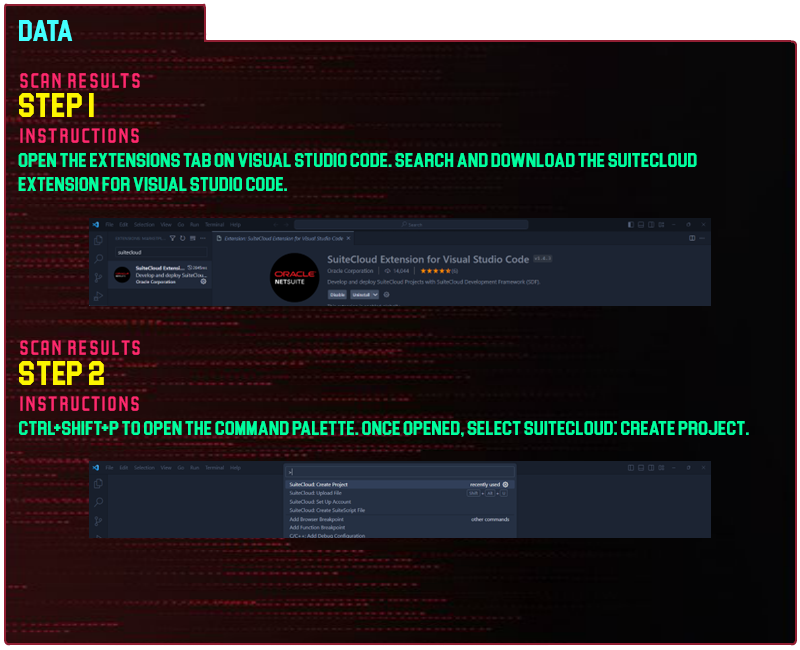
<style>
.page{position:relative;width:800px;height:650px}
.page>*{position:absolute;margin:0}
.t1{font:30px "Blockletter";color:#43ffff}
.t2{font:35px "Party-Lights-[WLM]-Flat";color:#ff296d}
.t3{font:35px "Blockletter";color:#fdf500}
.t4{font:20px "Blockletter";color:#00ff9f}
.t5{font:34.9px "Party-Lights-[WLM]-Flat";color:#ff296d}
.t6{font:34.9px "Blockletter";color:#fdf500}
.t7{font:19.9px "Blockletter";color:#00ff9f}
</style>
<div class="page">
<p class="t1" style="left:19px;top:20px;width:54px;height:21px">Data</p>
<p class="t2" style="left:20px;top:73px;width:120px;height:15px">Scan REsults</p>
<p class="t3" style="left:19px;top:93px;width:75px;height:24px">Step 1</p>
<p class="t2" style="left:20px;top:128px;width:119px;height:15px">instructions</p>
<p class="t4" style="left:18px;top:153px;width:679px;height:38px">Open the Extensions tab on Visual Studio Code. Search and Download the SuiteCloud Extension for Visual Studio Code.</p>
<p class="t5" style="left:20px;top:340px;width:120px;height:15px">Scan REsults</p>
<p class="t6" style="left:19px;top:361px;width:85px;height:24px">Step 2</p>
<p class="t5" style="left:20px;top:396px;width:119px;height:15px">instructions</p>
<p class="t7" style="left:19px;top:421px;width:730px;height:16px">Ctrl+Shift+P to open the command palette. Once opened, Select SuiteCloud: Create Project.</p>
</div>
